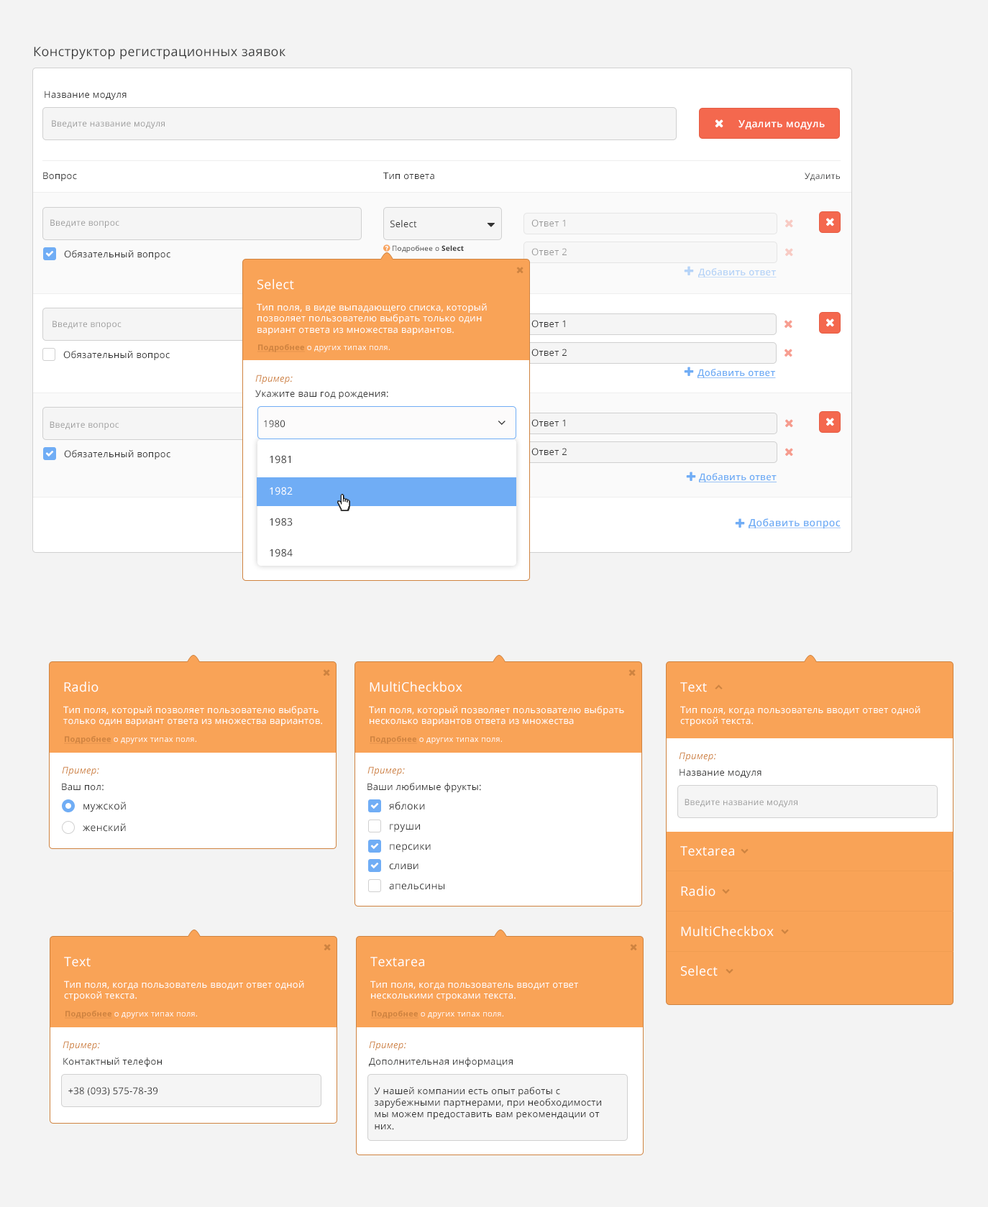
<style>
.page{position:relative;width:988px;height:1207px;background:#f3f3f3}
.page>*{position:absolute;margin:0}
.t1{font:12.9px "OpenSans";letter-spacing:0.025em;color:#373838}
.t2{font:9.3px "OpenSans";letter-spacing:0.025em;color:#333333}
.t3{font:8.6px "OpenSans";letter-spacing:0.025em;color:#999999}
.t4{font:10.1px "OpenSans-Semibold";letter-spacing:0.025em;color:#ffffff}
.t5{font:8.6px "OpenSans";letter-spacing:0.025em;color:#373838}
.t6{font:9.3px "OpenSans";letter-spacing:0.025em;color:#969696}
.t7{font:9.3px "OpenSans-Semibold";letter-spacing:0.025em;color:#b5d3f7;text-decoration:underline}
.t8{font:12.9px "OpenSans";letter-spacing:0.025em;color:#ffffff}
.t9{font:9.3px "OpenSans";letter-spacing:0.025em;color:#ffffff}
.t10{font:7.9px "OpenSans";letter-spacing:0.025em;color:#ffffff}
.t11{font:7.9px "OpenSans-Bold";letter-spacing:0.025em;color:#cf8340;text-decoration:underline}
.t12{font:9.3px "OpenSans-Italic";letter-spacing:0.025em;color:#cf8340}
.t13{font:9.3px "OpenSans-Semibold";letter-spacing:0.025em;color:#70adf5;text-decoration:underline}
.t14{font:10px "OpenSans";letter-spacing:0.025em;color:#333333}
.t15{font:10px "OpenSans";letter-spacing:0.025em;color:#ffffff}
.t16{font:10.1px "OpenSans-Semibold";letter-spacing:0.025em;color:#70adf5;text-decoration:underline}
.t17{font:9.3px "OpenSans";letter-spacing:0.025em;color:#373838}
</style>
<div class="page">
<p class="t1" style="left:34px;top:47px;width:251px;height:13px">Конструктор регистрационных заявок</p>
<p class="t2" style="left:45px;top:91px;width:82px;height:9px">Название модуля</p>
<p class="t3" style="left:52px;top:120px;width:113px;height:9px">Введите название модуля</p>
<p class="t4" style="left:738px;top:120px;width:87px;height:10px">Удалить модуль</p>
<p class="t2" style="left:43px;top:172px;width:34px;height:9px">Вопрос</p>
<p class="t2" style="left:383px;top:172px;width:51px;height:8px">Тип ответа</p>
<p class="t5" style="left:805px;top:173px;width:35px;height:8px">Удалить</p>
<p class="t3" style="left:50px;top:219px;width:69px;height:9px">Введите вопрос</p>
<p class="t2" style="left:390px;top:220px;width:27px;height:8px">Select</p>
<p class="t6" style="left:531px;top:219px;width:34px;height:8px">Ответ 1</p>
<p class="t2" style="left:64px;top:250px;width:106px;height:10px">Обязательный вопрос</p>
<p class="t6" style="left:531px;top:248px;width:36px;height:8px">Ответ 2</p>
<p class="t7" style="left:698px;top:268px;width:78px;height:10px">Добавить ответ</p>
<p class="t8" style="left:257px;top:279px;width:37px;height:11px">Select</p>
<p class="t9" style="left:257px;top:303px;width:230px;height:32px">Тип поля, в виде выпадающего списка, который позволяет пользователю выбрать только один вариант ответа из множества вариантов.</p>
<p class="t3" style="left:52px;top:321px;width:70px;height:8px">Введите впорос</p>
<p class="t2" style="left:531px;top:320px;width:34px;height:8px">Ответ 1</p>
<p class="t2" style="left:63px;top:351px;width:107px;height:9px">Обязательный вопрос</p>
<p class="t10" style="left:257px;top:344px;width:133px;height:8px"><span class="t11">Подробнее </span>о других типах поля.</p>
<p class="t2" style="left:531px;top:349px;width:36px;height:8px">Ответ 2</p>
<p class="t12" style="left:255px;top:375px;width:38px;height:9px">Пример:</p>
<p class="t13" style="left:697px;top:369px;width:79px;height:9px">Добавить ответ</p>
<p class="t2" style="left:255px;top:390px;width:133px;height:9px">Укажите ваш год рождения:</p>
<p class="t3" style="left:50px;top:421px;width:69px;height:9px">Введите вопрос</p>
<p class="t2" style="left:264px;top:420px;width:21px;height:8px">1980</p>
<p class="t2" style="left:531px;top:419px;width:34px;height:8px">Ответ 1</p>
<p class="t2" style="left:531px;top:448px;width:36px;height:8px">Ответ 2</p>
<p class="t2" style="left:64px;top:450px;width:106px;height:9px">Обязательный вопрос</p>
<p class="t14" style="left:270px;top:455px;width:20px;height:9px">1981</p>
<p class="t13" style="left:699px;top:473px;width:77px;height:9px">Добавить ответ</p>
<p class="t15" style="left:270px;top:487px;width:23px;height:8px">1982</p>
<p class="t14" style="left:270px;top:518px;width:23px;height:8px">1983</p>
<p class="t16" style="left:748px;top:518px;width:92px;height:11px">Добавить вопрос</p>
<p class="t14" style="left:270px;top:549px;width:23px;height:8px">1984</p>
<p class="t8" style="left:64px;top:682px;width:34px;height:10px">Radio</p>
<p class="t8" style="left:370px;top:682px;width:92px;height:10px">MultiCheckbox</p>
<p class="t8" style="left:680px;top:682px;width:27px;height:10px">Text</p>
<p class="t9" style="left:63px;top:706px;width:259px;height:20px">Тип поля, который позволяет пользователю выбрать только один вариант ответа из множества вариантов.</p>
<p class="t9" style="left:369px;top:706px;width:255px;height:20px">Тип поля, который позволяет пользователю выбрать несколько вариантов ответа из множества вариантов.</p>
<p class="t9" style="left:680px;top:706px;width:240px;height:20px">Тип поля, когда пользователь вводит ответ одной строкой текста.</p>
<p class="t10" style="left:64px;top:735px;width:132px;height:9px"><span class="t11">Подробнее </span>о других типах поля.</p>
<p class="t10" style="left:370px;top:735px;width:132px;height:9px"><span class="t11">Подробнее </span>о других типах поля.</p>
<p class="t12" style="left:679px;top:752px;width:37px;height:9px">Пример:</p>
<p class="t12" style="left:62px;top:766px;width:37px;height:10px">Пример:</p>
<p class="t12" style="left:367px;top:766px;width:38px;height:10px">Пример:</p>
<p class="t17" style="left:679px;top:769px;width:82px;height:9px">Название модуля</p>
<p class="t2" style="left:62px;top:783px;width:42px;height:8px">Ваш пол:</p>
<p class="t2" style="left:367px;top:783px;width:114px;height:9px">Ваши любимые фрукты:</p>
<p class="t14" style="left:83px;top:802px;width:43px;height:10px">мужской</p>
<p class="t14" style="left:389px;top:802px;width:36px;height:8px">яблоки</p>
<p class="t3" style="left:684px;top:799px;width:113px;height:8px">Введите название модуля</p>
<p class="t14" style="left:83px;top:823px;width:43px;height:9px">женский</p>
<p class="t14" style="left:390px;top:824px;width:30px;height:9px">груши</p>
<p class="t14" style="left:390px;top:844px;width:41px;height:9px">персики</p>
<p class="t8" style="left:680px;top:846px;width:54px;height:10px">Textarea</p>
<p class="t14" style="left:389px;top:863px;width:29px;height:7px">сливи</p>
<p class="t14" style="left:389px;top:884px;width:55px;height:6px">апельсины</p>
<p class="t8" style="left:681px;top:886px;width:34px;height:11px">Radio</p>
<p class="t8" style="left:681px;top:926px;width:93px;height:11px">MultiCheckbox</p>
<p class="t8" style="left:64px;top:957px;width:27px;height:10px">Text</p>
<p class="t8" style="left:370px;top:957px;width:54px;height:10px">Textarea</p>
<p class="t8" style="left:681px;top:966px;width:37px;height:10px">Select</p>
<p class="t9" style="left:64px;top:981px;width:240px;height:20px">Тип поля, когда пользователь вводит ответ одной строкой текста.</p>
<p class="t9" style="left:370px;top:981px;width:208px;height:20px">Тип поля, когда пользователь вводит ответ несколькими строками текста.</p>
<p class="t10" style="left:65px;top:1010px;width:132px;height:9px"><span class="t11">Подробнее </span>о других типах поля.</p>
<p class="t10" style="left:371px;top:1010px;width:132px;height:9px"><span class="t11">Подробнее </span>о других типах поля.</p>
<p class="t12" style="left:63px;top:1041px;width:37px;height:9px">Пример:</p>
<p class="t12" style="left:369px;top:1041px;width:37px;height:9px">Пример:</p>
<p class="t17" style="left:63px;top:1058px;width:99px;height:9px">Контактный телефон</p>
<p class="t17" style="left:369px;top:1058px;width:144px;height:9px">Дополнительная информация</p>
<p class="t2" style="left:68px;top:1087px;width:89px;height:9px">+38 (093) 575-78-39</p>
<p class="t2" style="left:374px;top:1087px;width:227px;height:43px">У нашей компании есть опыт работы с <br>зарубежными партнерами, при необходимости <br>мы можем предоставить вам рекомендации от <br>них.</p>
</div>
